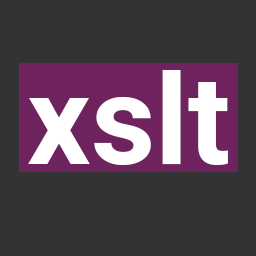
<style>
.page{position:relative;width:256px;height:256px;background:#333333}
.page>*{position:absolute;margin:0}
.t1{font:125px "Roboto-Bold";color:#ffffff}
</style>
<div class="page">
<p class="t1" style="left:28px;top:70px;width:200px;height:95px">xslt</p>
</div>
